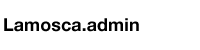
<style>
.page{position:relative;width:200px;height:50px;background:#ffffff}
.page>*{position:absolute;margin:0}
.t1{font:18px "HelveticaNeue-Bold";color:#000000}
</style>
<div class="page">
<p class="t1" style="left:4px;top:18px;width:135px;height:14px">Lamosca.admin</p>
</div>
